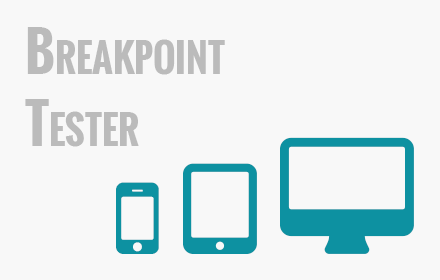
<style>
.page{position:relative;width:440px;height:280px;background:#f8f8f8}
.page>*{position:absolute;margin:0}
.t1{font:54px/72px "Oswald-Bold";color:#bbbbbb;font-variant:small-caps}
</style>
<div class="page">
<p class="t1" style="left:25px;top:27px;width:200px;height:120px">Breakpoint<br>Tester</p>
</div>
